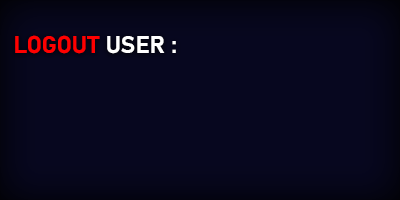
<style>
.page{position:relative;width:400px;height:200px;background:#07071f}
.page>*{position:absolute;margin:0}
.t1{font:24px "Bahnschrift-Bold";color:#ff0000}
.t2{font:24px "Bahnschrift-Bold";color:#ffffff}
</style>
<div class="page">
<p class="t1" style="left:15px;top:35px;width:161px;height:19px">LOGOUT <span class="t2">USER :</span></p>
</div>
